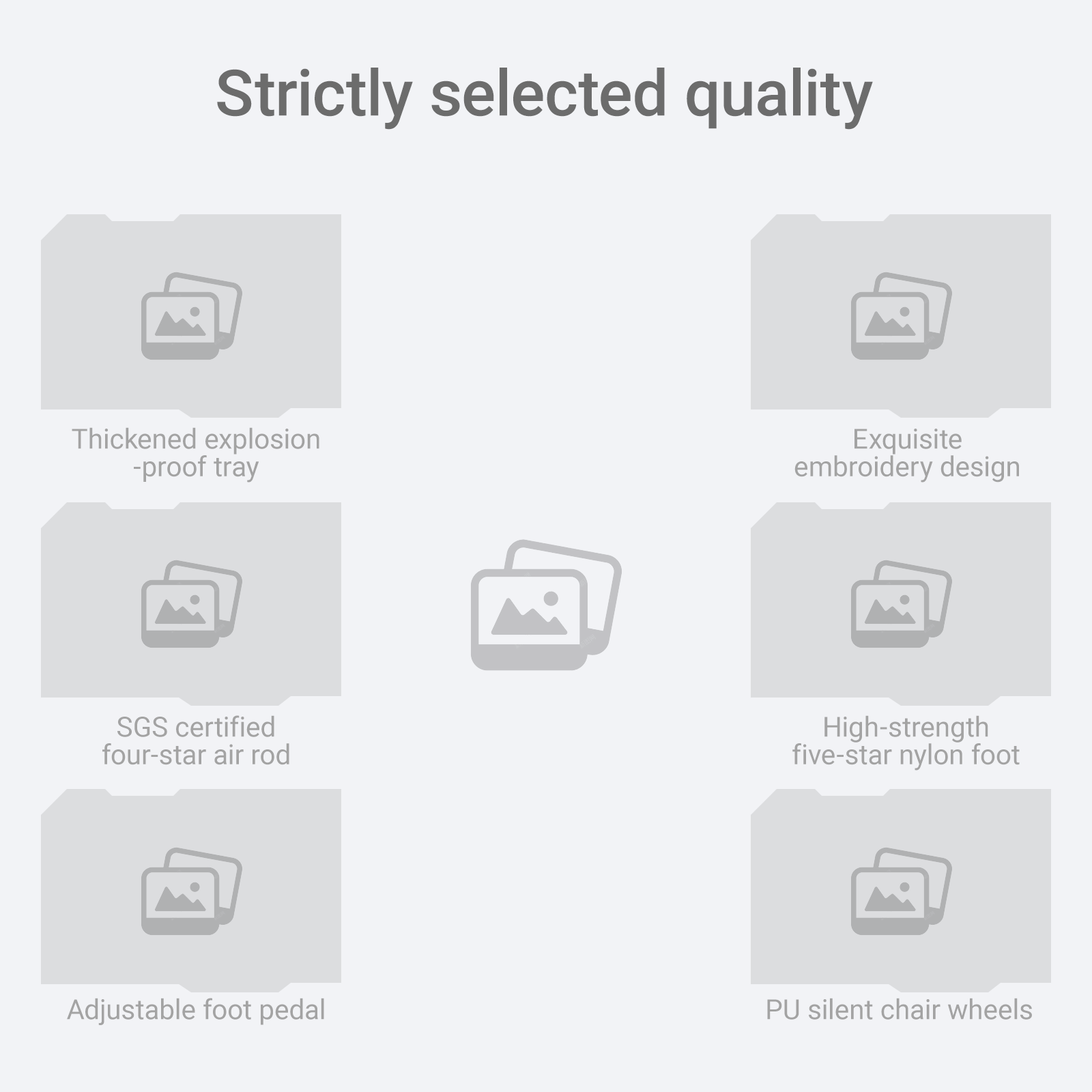
<style>
.page{position:relative;width:1092px;height:1092px;background:#f2f3f6}
.page>*{position:absolute;margin:0}
.t1{font:64.1px "Roboto-Medium";color:#6c6c6c}
.t2{font:27.7px/27.7px "Roboto-Regular";color:#a3a3a3}
.t3{font:27.7px "Roboto-Regular";color:#a3a3a3}
</style>
<div class="page">
<p class="t1" style="left:217px;top:68px;width:656px;height:62px">Strictly selected quality</p>
<p class="t2" style="left:72px;top:427px;width:247px;height:56px;text-align:center">Thickened explosion<br>-proof tray</p>
<p class="t2" style="left:794px;top:429px;width:225px;height:54px;text-align:center">Exquisite<br>embroidery design</p>
<p class="t2" style="left:102px;top:715px;width:187px;height:50px;text-align:center">SGS certified<br>four-star air rod</p>
<p class="t2" style="left:792px;top:715px;width:228px;height:56px;text-align:center">High-strength<br>five-star nylon foot</p>
<p class="t3" style="left:67px;top:998px;width:257px;height:27px">Adjustable foot pedal</p>
<p class="t3" style="left:767px;top:998px;width:265px;height:22px">PU silent chair wheels</p>
</div>
